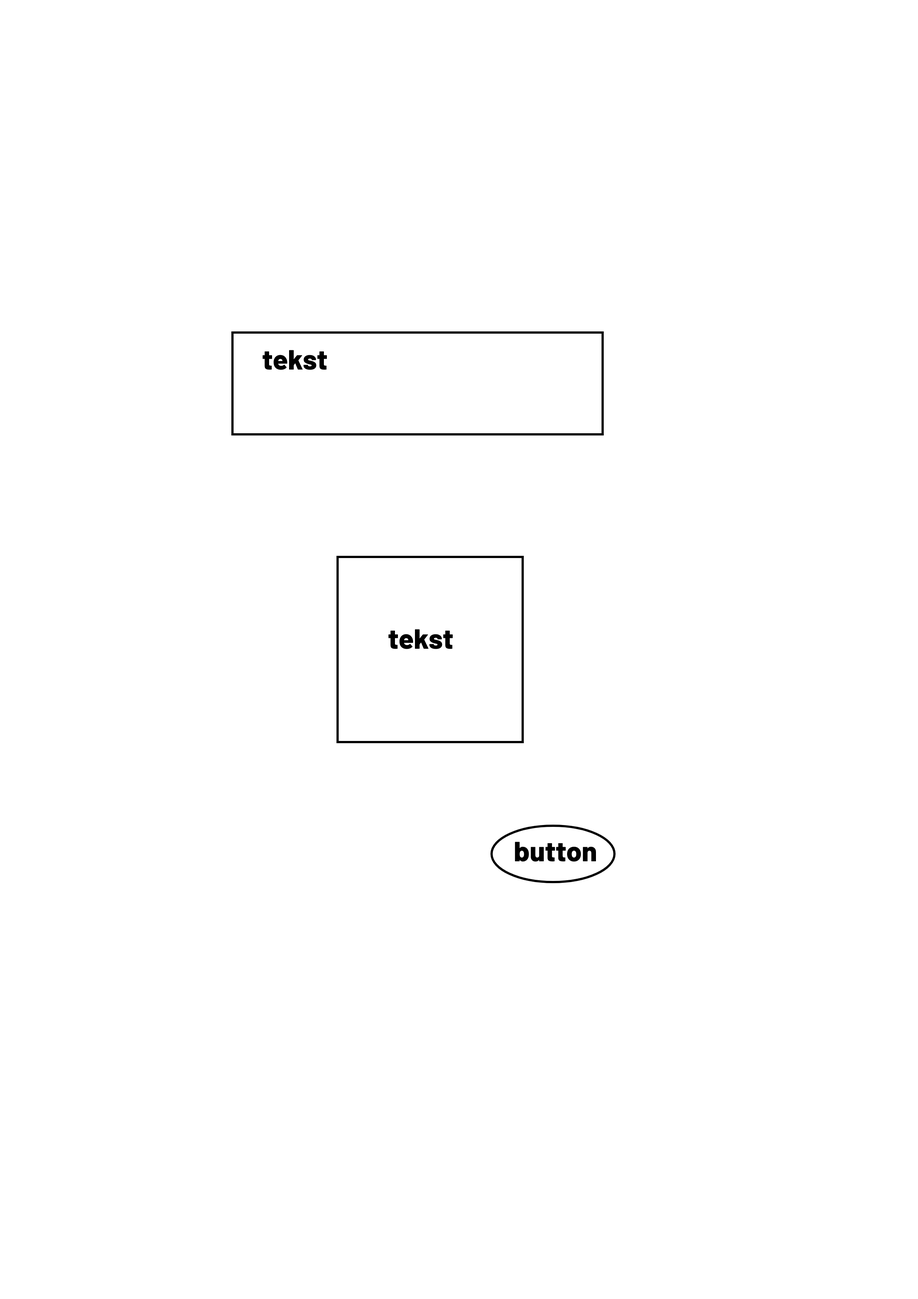
<style>
.page{position:relative;width:918px;height:1299px;background:#ffffff}
.page>*{position:absolute;margin:0}
.t1{font:27.8px "Barlow-ExtraBold";color:#000000}
</style>
<div class="page">
<p class="t1" style="left:262px;top:350px;width:65px;height:20px">tekst</p>
<p class="t1" style="left:388px;top:629px;width:65px;height:20px">tekst</p>
<p class="t1" style="left:515px;top:842px;width:81px;height:20px">button</p>
</div>
